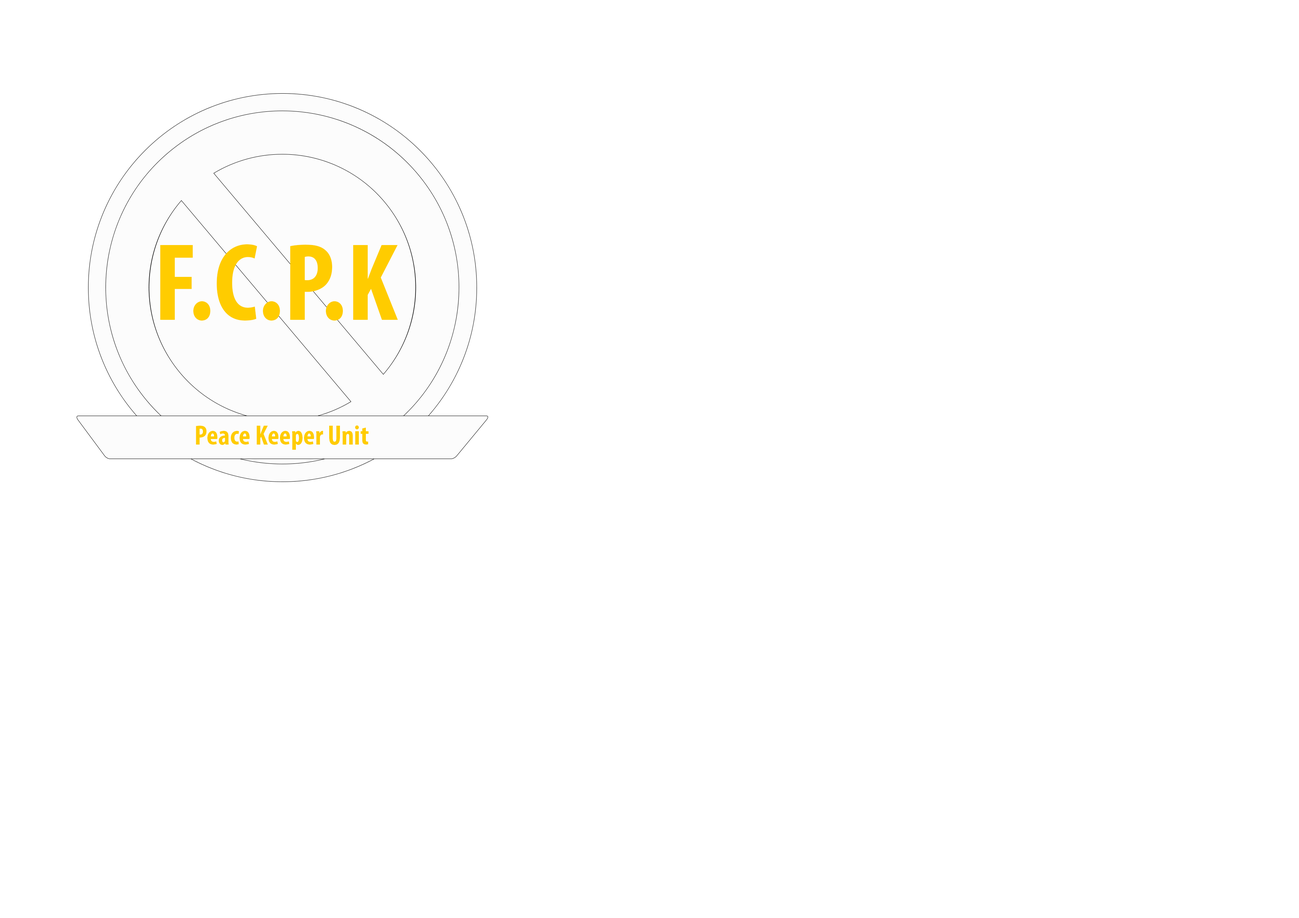
<style>
.page{position:relative;width:1299px;height:918px;background:#ffffff}
.page>*{position:absolute;margin:0}
.t1{font:111px "MyriadPro-BoldCond";color:#ffcc00}
.t2{font:27.8px "MyriadPro-BoldCond";color:#ffcc00}
</style>
<div class="page">
<p class="t1" style="left:160px;top:244px;width:238px;height:77px">F.C.P.K</p>
<p class="t2" style="left:196px;top:425px;width:173px;height:25px">Peace Keeper Unit</p>
</div>
